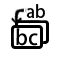
<style>
.page{position:relative;width:64px;height:64px;background:#ffffff}
.page>*{position:absolute;margin:0}
.t1{font:16.7px "AdobeHeitiStd-Regular";color:#000000}
.t2{font:20.8px "AdobeHeitiStd-Regular";color:#000000}
</style>
<div class="page">
<p class="t1" style="left:26px;top:4px;width:19px;height:14px">ab</p>
<p class="t2" style="left:16px;top:28px;width:22px;height:18px;rotate:1deg">bc</p>
</div>
